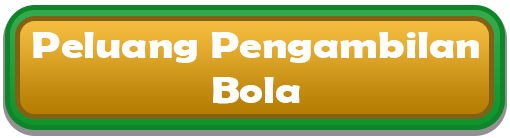
<style>
.page{position:relative;width:510px;height:138px}
.page>*{position:absolute;margin:0}
.t1{font:37.5px "BerlinSansFBDemi-Bold";color:#ffffff;scale:1.2 1}
</style>
<div class="page">
<p class="t1" style="left:32px;top:32px;width:447px;height:72px;text-align:center">Peluang Pengambilan<br>Bola</p>
</div>
